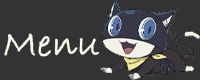
<style>
.page{position:relative;width:200px;height:80px;background:#333333}
.page>*{position:absolute;margin:0}
.t1{font:38.8px "BradleyHandITC";color:#fbfdf1;font-weight:bold}
</style>
<div class="page">
<p class="t1" style="left:4px;top:33px;width:96px;height:24px">Menu</p>
</div>
